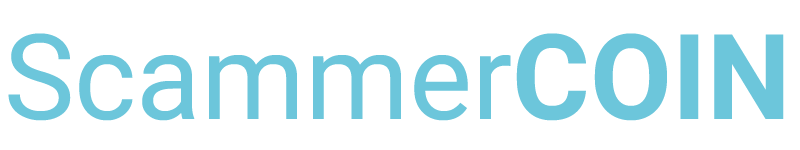
<style>
.page{position:relative;width:800px;height:150px;background:#ffffff}
.page>*{position:absolute;margin:0}
.t1{font:118.8px "Roboto-Regular";color:#6cc6db}
.t2{font:118.8px "Roboto-Bold";color:#6cc6db}
</style>
<div class="page">
<p class="t1" style="left:8px;top:33px;width:776px;height:88px">Scammer<span class="t2">COIN</span></p>
</div>
